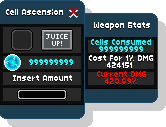
<style>
.page{position:relative;width:166px;height:127px;background:#292929}
.page>*{position:absolute;margin:0}
.t1{font:9px "Hobo";color:#ffffff;scale:0.9 1}
.t2{font:9px "Hobo";color:#00ffff;scale:0.9 1}
.t3{font:9px "Hobo";color:#feffff;scale:0.9 1}
.t4{font:9px "Hobo";color:#ff0000;scale:0.9 1}
</style>
<div class="page">
<p class="t1" style="left:6px;top:9px;width:57px;height:6px">Cell Ascension</p>
<p class="t1" style="left:94px;top:22px;width:56px;height:8px">Weapon Stats</p>
<p class="t2" style="left:91px;top:39px;width:60px;height:6px">Cells Consumed</p>
<p class="t2" style="left:99px;top:46px;width:44px;height:6px">999999999</p>
<p class="t2" style="left:29px;top:59px;width:44px;height:6px">999999999</p>
<p class="t1" style="left:89px;top:55px;width:64px;height:6px">Cost For 1% DMG</p>
<p class="t1" style="left:107px;top:62px;width:25px;height:6px">424151</p>
<p class="t3" style="left:13px;top:75px;width:59px;height:6px">Insert Amount</p>
<p class="t4" style="left:97px;top:71px;width:49px;height:6px">Current DMG</p>
<p class="t4" style="left:105px;top:78px;width:32px;height:6px">420.69%</p>
</div>
